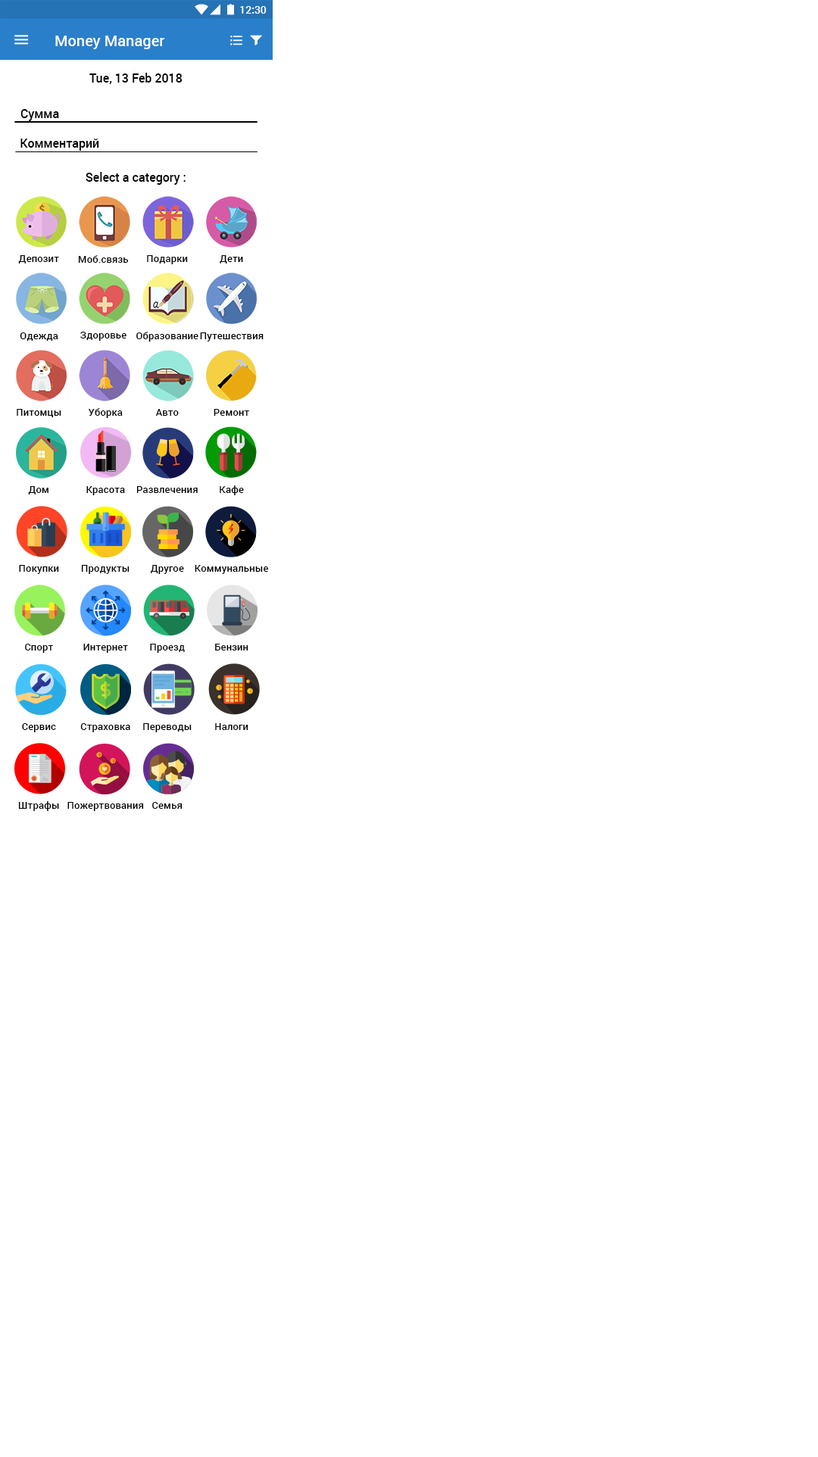
<style>
.page{position:relative;width:818px;height:1457px;background:#ffffff}
.page>*{position:absolute;margin:0}
.t1{font:10.6px "Roboto-Medium";color:#ffffff}
.t2{font:15.1px "Roboto-Medium";color:#ffffff}
.t3{font:12.1px "Roboto-Medium";color:#000000}
.t4{font:10.1px "Roboto-Medium";color:#000000}
</style>
<div class="page">
<p class="t1" style="left:240px;top:6px;width:27px;height:8px">12:30</p>
<p class="t2" style="left:55px;top:36px;width:109px;height:13px">Money Manager</p>
<p class="t3" style="left:89px;top:73px;width:94px;height:11px">Тue, 13 Feb 2018</p>
<p class="t3" style="left:20px;top:109px;width:39px;height:12px">Сумма</p>
<p class="t3" style="left:20px;top:139px;width:79px;height:12px">Комментарий</p>
<p class="t3" style="left:86px;top:172px;width:100px;height:13px">Select a category :</p>
<p class="t4" style="left:18px;top:255px;width:41px;height:9px">Депозит</p>
<p class="t4" style="left:78px;top:255px;width:51px;height:8px">Моб.связь</p>
<p class="t4" style="left:147px;top:255px;width:41px;height:9px">Подарки</p>
<p class="t4" style="left:220px;top:255px;width:23px;height:9px">Дети</p>
<p class="t4" style="left:20px;top:333px;width:38px;height:8px">Одежда</p>
<p class="t4" style="left:80px;top:332px;width:47px;height:9px">Здоровье</p>
<p class="t4" style="left:136px;top:332px;width:62px;height:10px">Образование</p>
<p class="t4" style="left:200px;top:333px;width:64px;height:9px">Путешествия</p>
<p class="t4" style="left:17px;top:409px;width:44px;height:8px">Питомцы</p>
<p class="t4" style="left:88px;top:408px;width:35px;height:10px">Уборка</p>
<p class="t4" style="left:155px;top:409px;width:24px;height:7px">Авто</p>
<p class="t4" style="left:214px;top:409px;width:35px;height:7px">Ремонт</p>
<p class="t4" style="left:220px;top:486px;width:24px;height:9px">Кафе</p>
<p class="t4" style="left:28px;top:486px;width:20px;height:9px">Дом</p>
<p class="t4" style="left:86px;top:486px;width:39px;height:9px">Красота</p>
<p class="t4" style="left:136px;top:486px;width:62px;height:7px">Развлечения</p>
<p class="t4" style="left:19px;top:565px;width:40px;height:9px">Покупки</p>
<p class="t4" style="left:81px;top:565px;width:49px;height:9px">Продукты</p>
<p class="t4" style="left:150px;top:565px;width:34px;height:9px">Другое</p>
<p class="t4" style="left:195px;top:565px;width:74px;height:9px">Коммунальные</p>
<p class="t4" style="left:25px;top:644px;width:28px;height:9px">Спорт</p>
<p class="t4" style="left:83px;top:644px;width:45px;height:9px">Интернет</p>
<p class="t4" style="left:150px;top:644px;width:35px;height:9px">Проезд</p>
<p class="t4" style="left:215px;top:644px;width:33px;height:7px">Бензин</p>
<p class="t4" style="left:22px;top:723px;width:34px;height:10px">Сервис</p>
<p class="t4" style="left:80px;top:723px;width:50px;height:10px">Страховка</p>
<p class="t4" style="left:143px;top:723px;width:49px;height:10px">Переводы</p>
<p class="t4" style="left:215px;top:723px;width:33px;height:7px">Налоги</p>
<p class="t4" style="left:18px;top:801px;width:41px;height:10px">Штрафы</p>
<p class="t4" style="left:67px;top:802px;width:77px;height:9px">Пожертвования</p>
<p class="t4" style="left:152px;top:802px;width:31px;height:7px">Семья</p>
</div>
